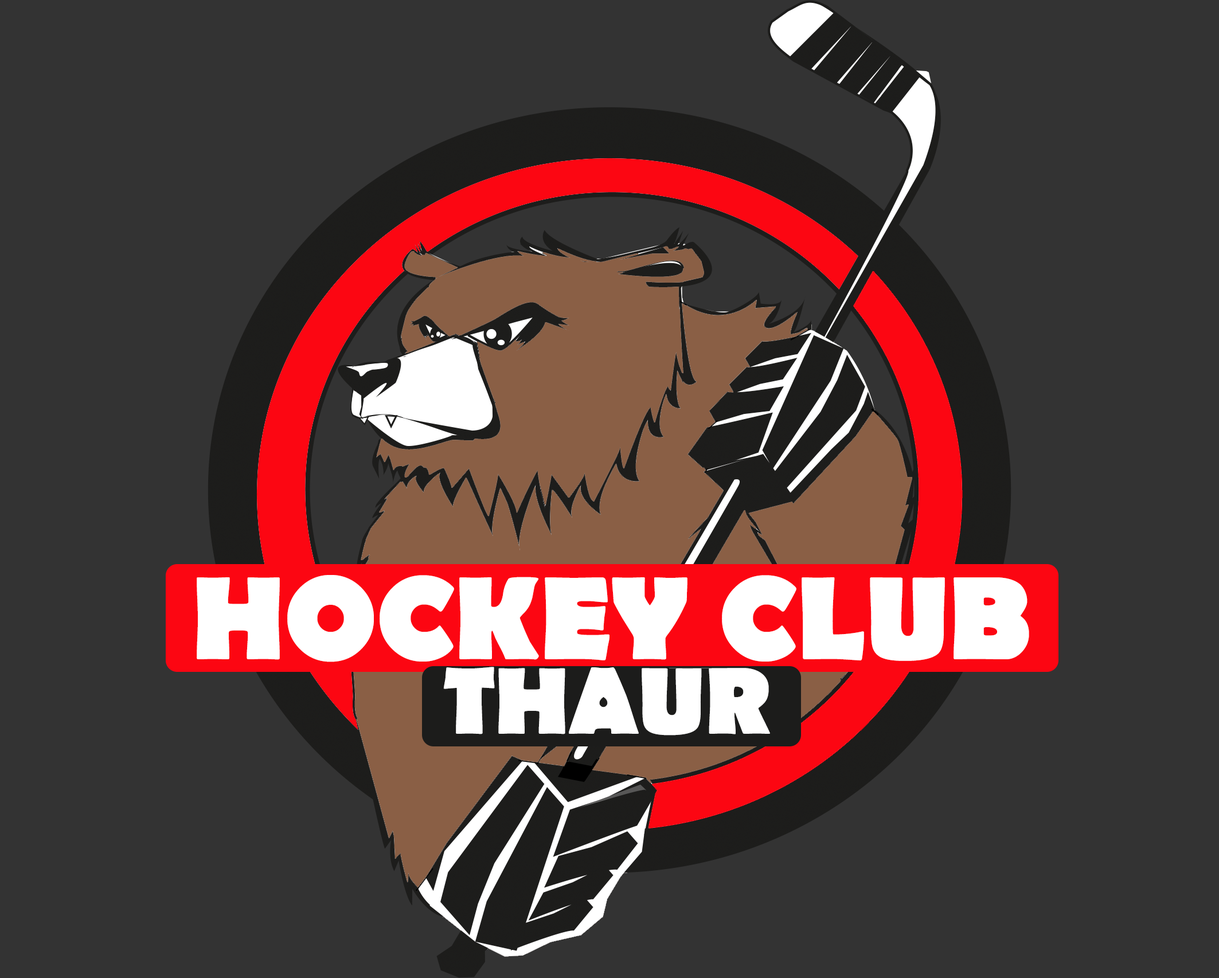
<style>
.page{position:relative;width:1219px;height:978px;background:#333333}
.page>*{position:absolute;margin:0}
.t1{font:119.5px "BerlinSansFB-Bold";color:#ffffff}
.t2{font:95.6px "BerlinSansFB-Bold";color:#ffffff}
</style>
<div class="page">
<p class="t1" style="left:197px;top:575px;width:832px;height:87px">HOCKEY CLUB</p>
<p class="t2" style="left:443px;top:667px;width:327px;height:69px">THAUR</p>
</div>
